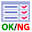
<style>
.page{position:relative;width:32px;height:32px;background:#ffffff}
.page>*{position:absolute;margin:0}
.t1{font:9.3px "MyriadPro-Bold";color:#079000}
.t2{font:9.3px "MyriadPro-Bold";color:#000000}
.t3{font:9.3px "MyriadPro-Bold";color:#ff0000}
</style>
<div class="page">
<p class="t1" style="left:1px;top:23px;width:29px;height:8px">OK<span class="t2">/</span><span class="t3">NG</span></p>
</div>
